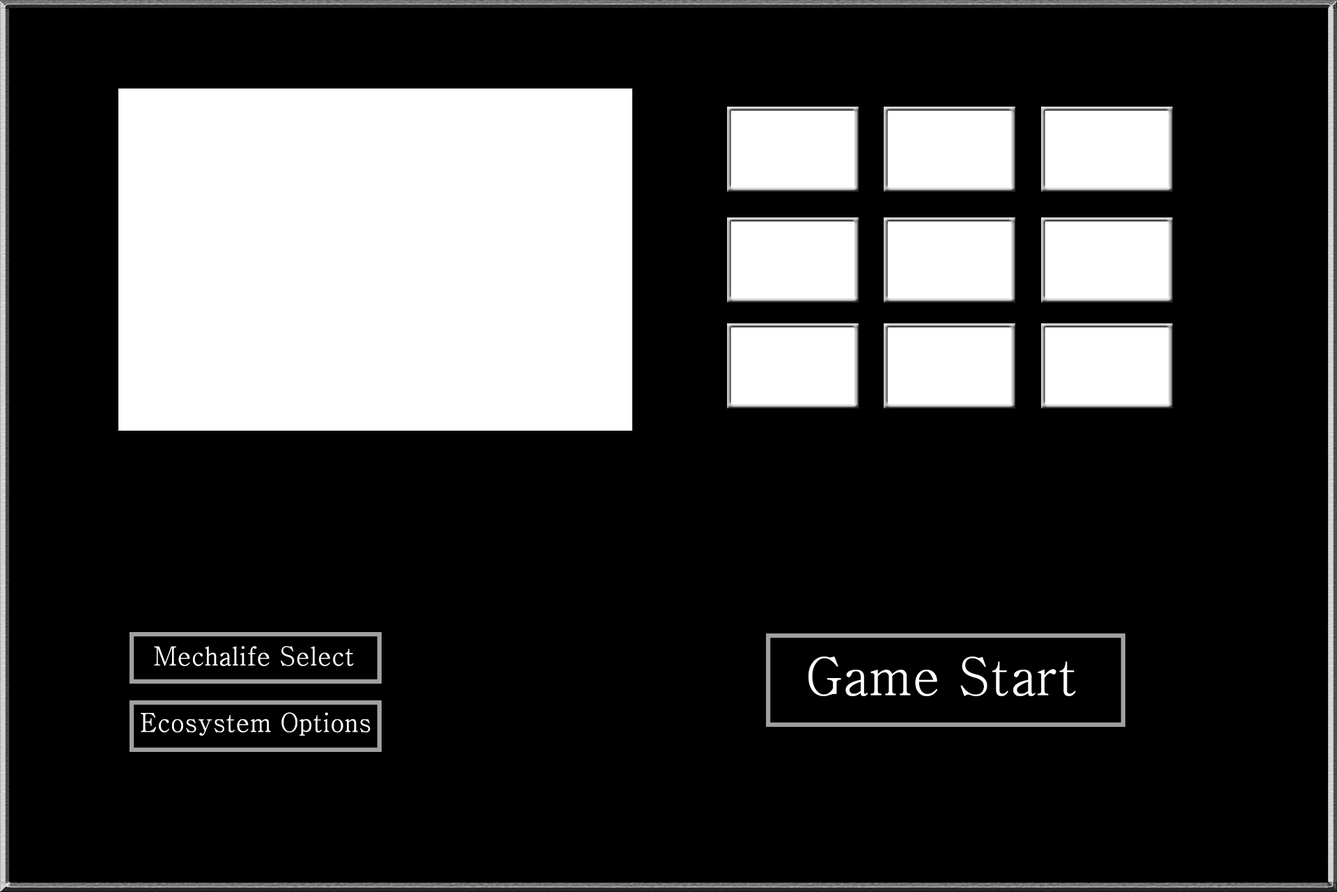
<style>
.page{position:relative;width:1337px;height:892px;background:#000000}
.page>*{position:absolute;margin:0}
.t1{font:26.1px "HyhwpEQ";color:#ffffff}
.t2{font:52.2px "HyhwpEQ";color:#ffffff}
</style>
<div class="page">
<p class="t1" style="left:154px;top:646px;width:200px;height:20px">Mechalife Select</p>
<p class="t2" style="left:809px;top:656px;width:267px;height:40px">Game Start</p>
<p class="t1" style="left:141px;top:712px;width:230px;height:24px">Ecosystem Options</p>
</div>
